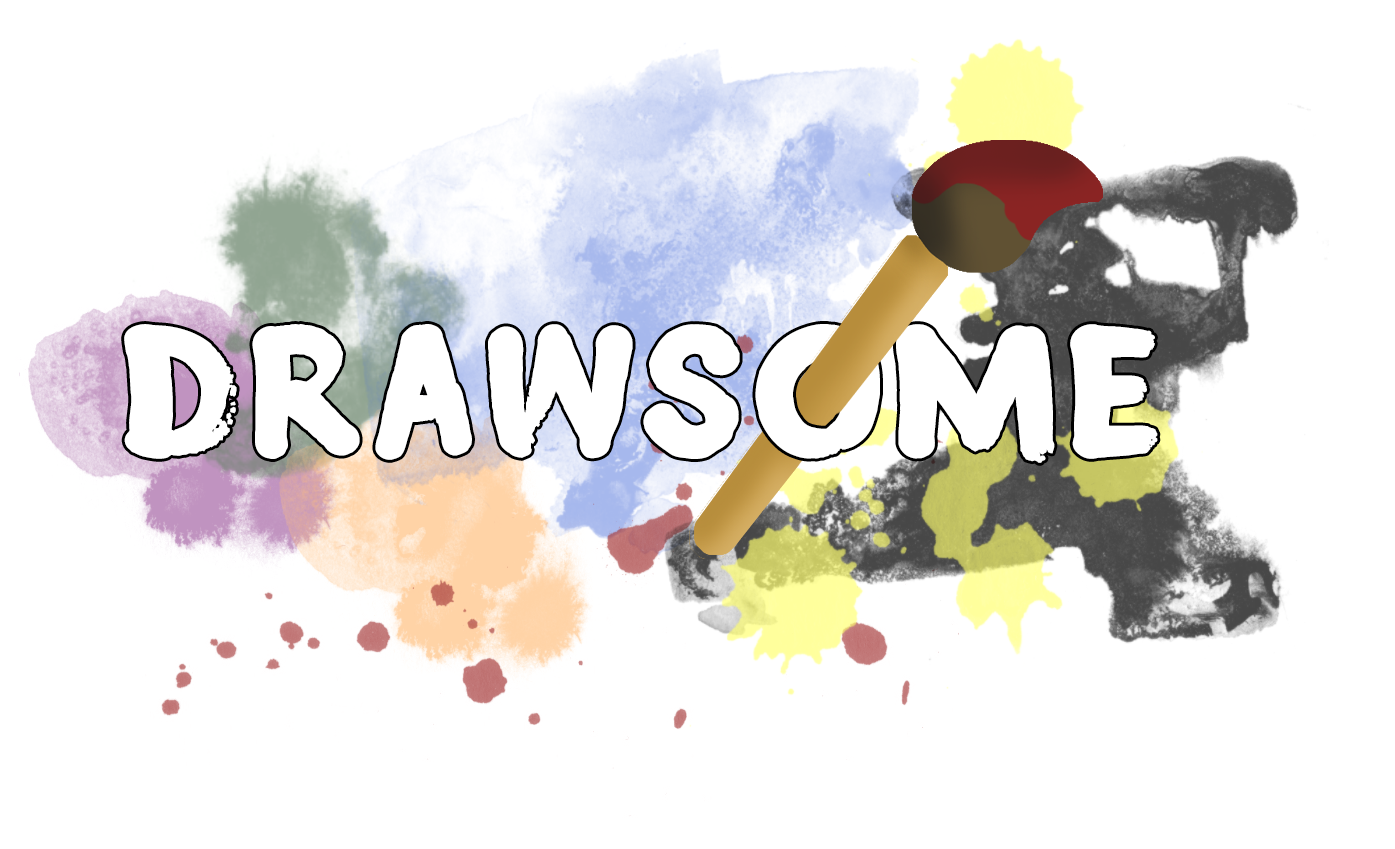
<style>
.page{position:relative;width:1395px;height:849px;background:#ffffff}
.page>*{position:absolute;margin:0}
.t1{font:162px "DKInkyFingers";color:#ffffff;font-weight:bold}
</style>
<div class="page">
<p class="t1" style="left:124px;top:324px;width:1034px;height:139px">DRAWSOME</p>
</div>
